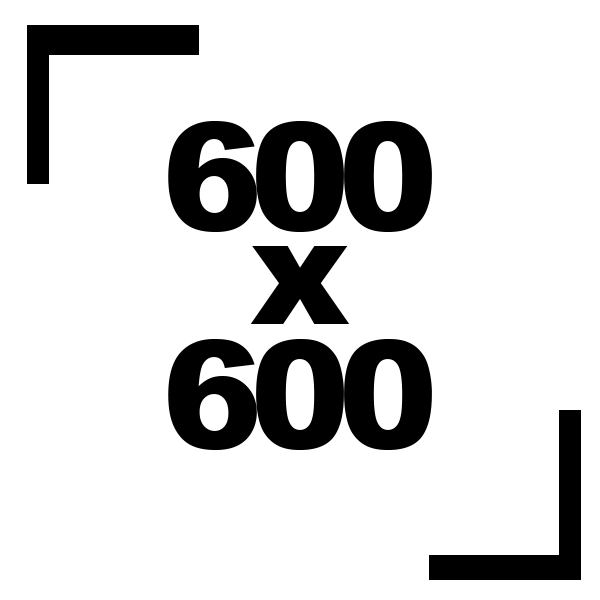
<style>
.page{position:relative;width:600px;height:600px;background:#ffffff}
.page>*{position:absolute;margin:0}
.t1{font:150px/94px "Arial-Black";letter-spacing:-0.08em;color:#000000}
.t2{font:150px/124px "Arial-Black";letter-spacing:-0.08em;color:#000000}
</style>
<div class="page">
<p class="t1" style="left:168px;top:121px;width:264px;height:329px;text-align:center">600<br>x<br><span class="t2">600</span></p>
</div>
